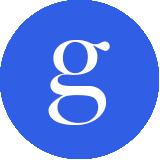
<style>
.page{position:relative;width:160px;height:160px;background:#305ee5}
.page>*{position:absolute;margin:0}
.t1{font:116.3px "BigCaslon-Medium";color:#ffffff}
</style>
<div class="page">
<p class="t1" style="left:48px;top:40px;width:62px;height:85px">g</p>
</div>
